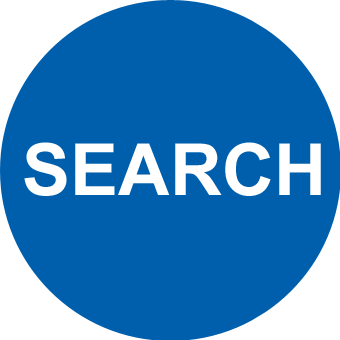
<style>
.page{position:relative;width:340px;height:340px;background:#005fad}
.page>*{position:absolute;margin:0}
.t1{font:72px "Arial-BoldMT";color:#ffffff}
</style>
<div class="page">
<p class="t1" style="left:24px;top:142px;width:297px;height:54px">SEARCH</p>
</div>
